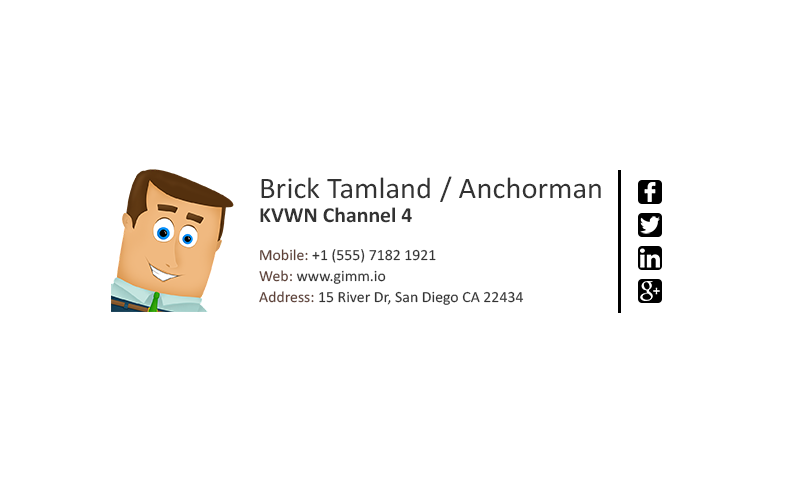
<style>
.page{position:relative;width:800px;height:500px;background:#ffffff}
.page>*{position:absolute;margin:0}
.t1{font:30px "Calibri";color:#333333}
.t2{font:21.4px "Calibri-Bold";color:#333333}
.t3{font:15.5px "Calibri";color:#333333}
.t4{font:15.5px "Calibri";color:#5e4036}
</style>
<div class="page">
<p class="t1" style="left:261px;top:177px;width:169px;height:22px">Brick Tamland</p>
<p class="t1" style="left:440px;top:176px;width:161px;height:26px">/ Anchorman</p>
<p class="t2" style="left:260px;top:207px;width:152px;height:16px">KVWN Channel 4</p>
<p class="t3" style="left:260px;top:249px;width:176px;height:14px"><span class="t4">Mobile:</span> +1 (555) 7182 1921<br> 2119</p>
<p class="t3" style="left:259px;top:270px;width:127px;height:14px"><span class="t4">Web:</span> www.gimm.io</p>
<p class="t3" style="left:259px;top:291px;width:265px;height:14px"><span class="t4">Address:</span> 15 River Dr, San Diego CA 22434</p>
</div>
